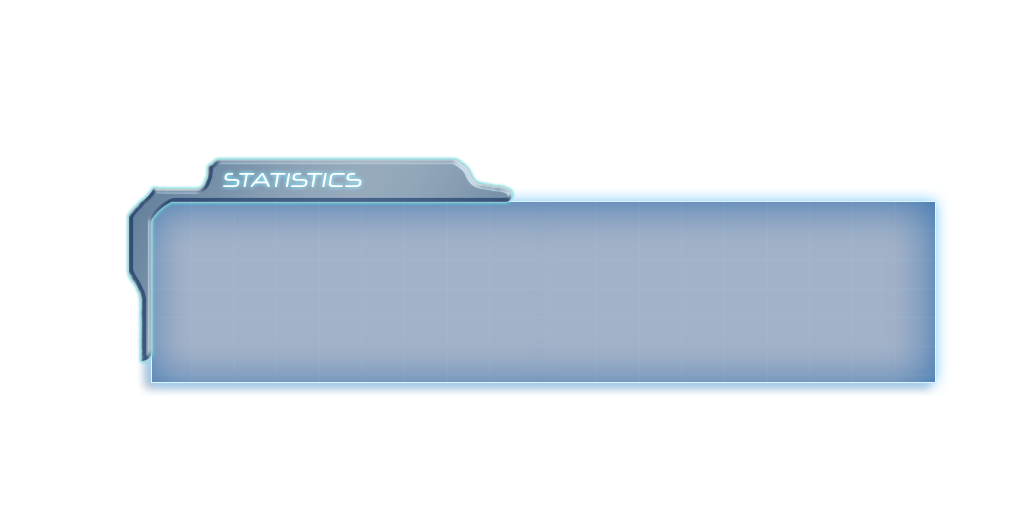
<style>
.page{position:relative;width:1024px;height:512px;background:#ffffff}
.page>*{position:absolute;margin:0}
.t1{font:20px "NeuropolXFree";color:#ffffff;font-style:italic}
</style>
<div class="page">
<p class="t1" style="left:223px;top:173px;width:139px;height:14px">STATISTICS</p>
</div>
